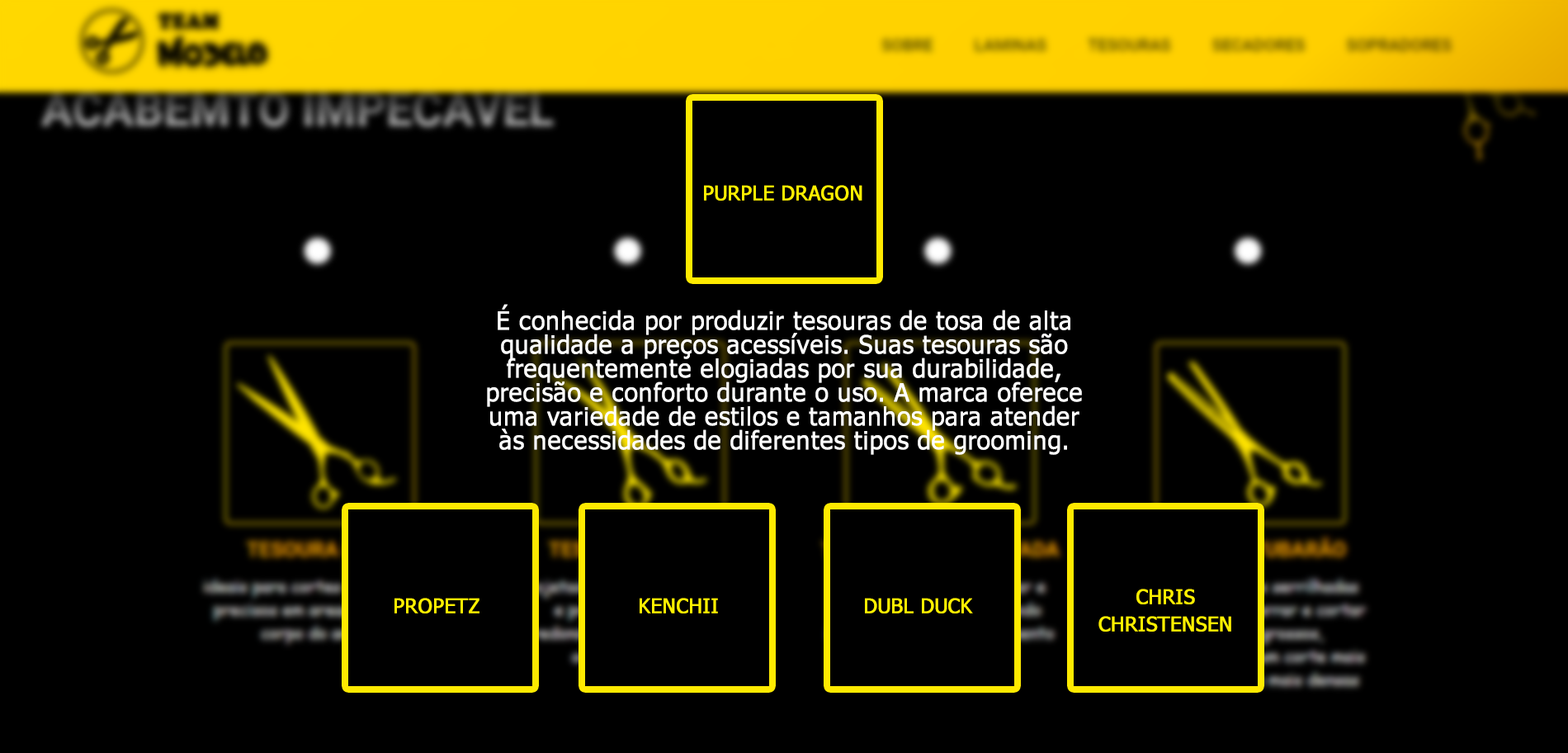
<style>
.page{position:relative;width:1568px;height:753px;background:#000000}
.page>*{position:absolute;margin:0}
.t1{font:20px "Tahoma";color:#fff000;font-weight:bold}
.t2{font:25px/23.9px "Tahoma";color:#ffffff;font-weight:bold}
.t3{font:20px/27.2px "Tahoma";color:#fff000;font-weight:bold}
</style>
<div class="page">
<p class="t1" style="left:704px;top:185px;width:158px;height:16px">PURPLE DRAGON</p>
<p class="t2" style="left:487px;top:304px;width:595px;height:151px;text-align:center">É conhecida por produzir tesouras de tosa de alta qualidade a preços acessíveis. Suas tesouras são frequentemente elogiadas por sua durabilidade, precisão e conforto durante o uso. A marca oferece uma variedade de estilos e tamanhos para atender às necessidades de diferentes tipos de grooming.</p>
<p class="t3" style="left:1098px;top:588px;width:133px;height:43px;text-align:center">CHRIS CHRISTENSEN</p>
<p class="t1" style="left:394px;top:597px;width:85px;height:16px">PROPETZ</p>
<p class="t1" style="left:640px;top:597px;width:78px;height:16px">KENCHII</p>
<p class="t1" style="left:865px;top:597px;width:108px;height:16px">DUBL DUCK</p>
</div>
